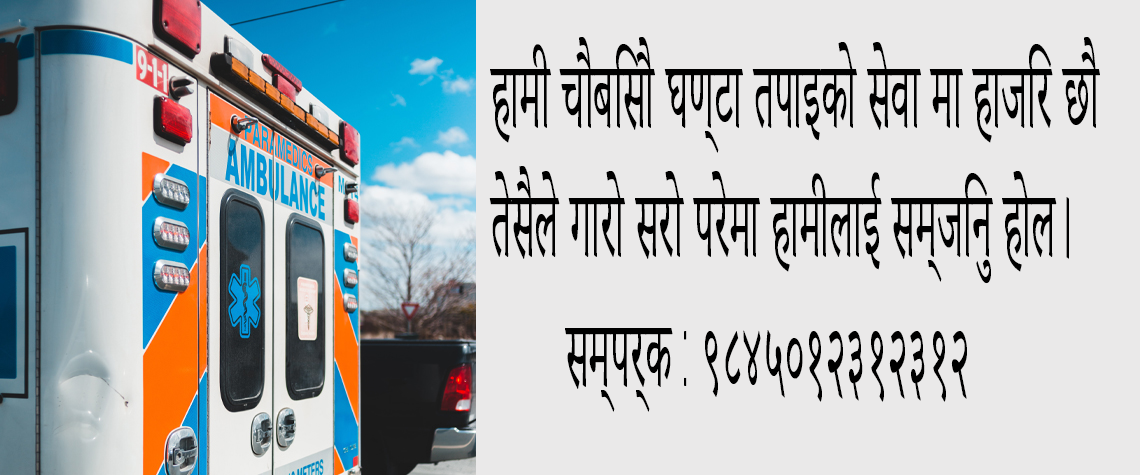
<style>
.page{position:relative;width:1140px;height:475px;background:#eae9e9}
.page>*{position:absolute;margin:0}
.t1{font:115.2px "AdobeDevanagari-Regular";color:#000000;scale:0.4 1}
.t2{font:115.2px "Gabriel-Sans-Cond-Light";color:#000000;scale:0.4 1}
</style>
<div class="page">
<p class="t1" style="left:489px;top:37px;width:611px;height:375px">हामी चौबिसौ घण्टा तपाइको सेवा मा हाजिर छौ <br><br><br>तेसैले गारो सरो परेमा हामीलाई सम्जिनु होल। <br><br><br>        सम्पर्क <span class="t2">: </span>९८४५०१२३१२३१२</p>
</div>
